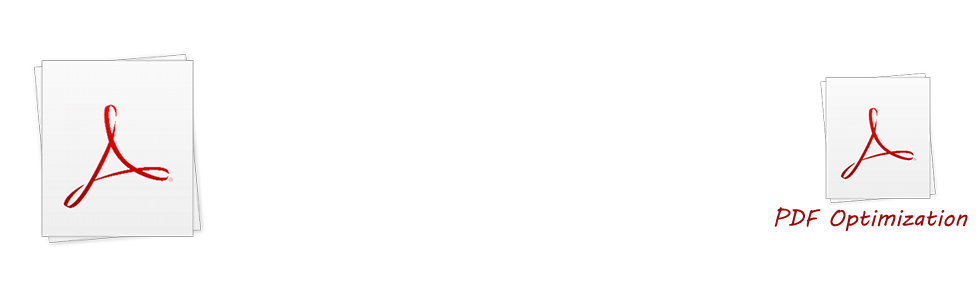
<style>
.page{position:relative;width:980px;height:300px;background:#ffffff}
.page>*{position:absolute;margin:0}
.t1{font:23.1px "MVBoli";color:#9d0909}
</style>
<div class="page">
<p class="t1" style="left:774px;top:207px;width:194px;height:24px">PDF Optimization</p>
</div>
